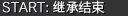
<style>
.page{position:relative;width:128px;height:16px;background:#333333}
.page>*{position:absolute;margin:0}
.t1{font:13px "SourceHanSansSC-Regular";color:#e9e9e9}
</style>
<div class="page">
<p class="t1" style="left:53px;top:0px;width:52px;height:14px">继承结束</p>
</div>
